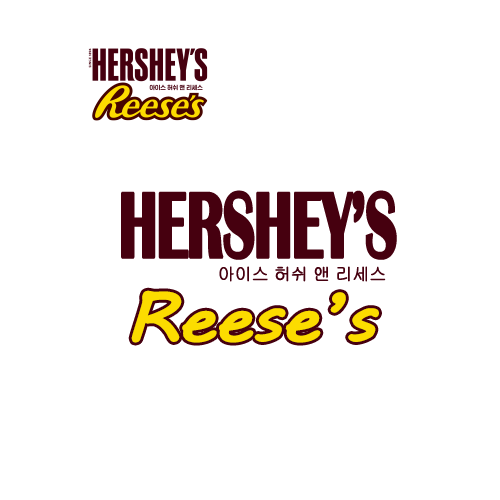
<style>
.page{position:relative;width:500px;height:500px;background:#ffffff}
.page>*{position:absolute;margin:0}
.t1{font:96.3px "BritannicBold";letter-spacing:-0.05em;color:#46000f;font-weight:bold;scale:0.62 1}
.t2{font:17.3px "Gulim";letter-spacing:-0.05em;color:#46000f;font-weight:bold}
.t3{font:66.5px "MVBoli";letter-spacing:-0.05em;color:#fcdc00;font-weight:bold;scale:1.17 1}
</style>
<div class="page">
<p class="t1" style="left:121px;top:190px;width:276px;height:70px">HERSHEY’S</p>
<p class="t2" style="left:219px;top:266px;width:167px;height:16px">아이스 허쉬 앤 리세스</p>
<p class="t3" style="left:131px;top:290px;width:248px;height:53px">Reese’s</p>
</div>
